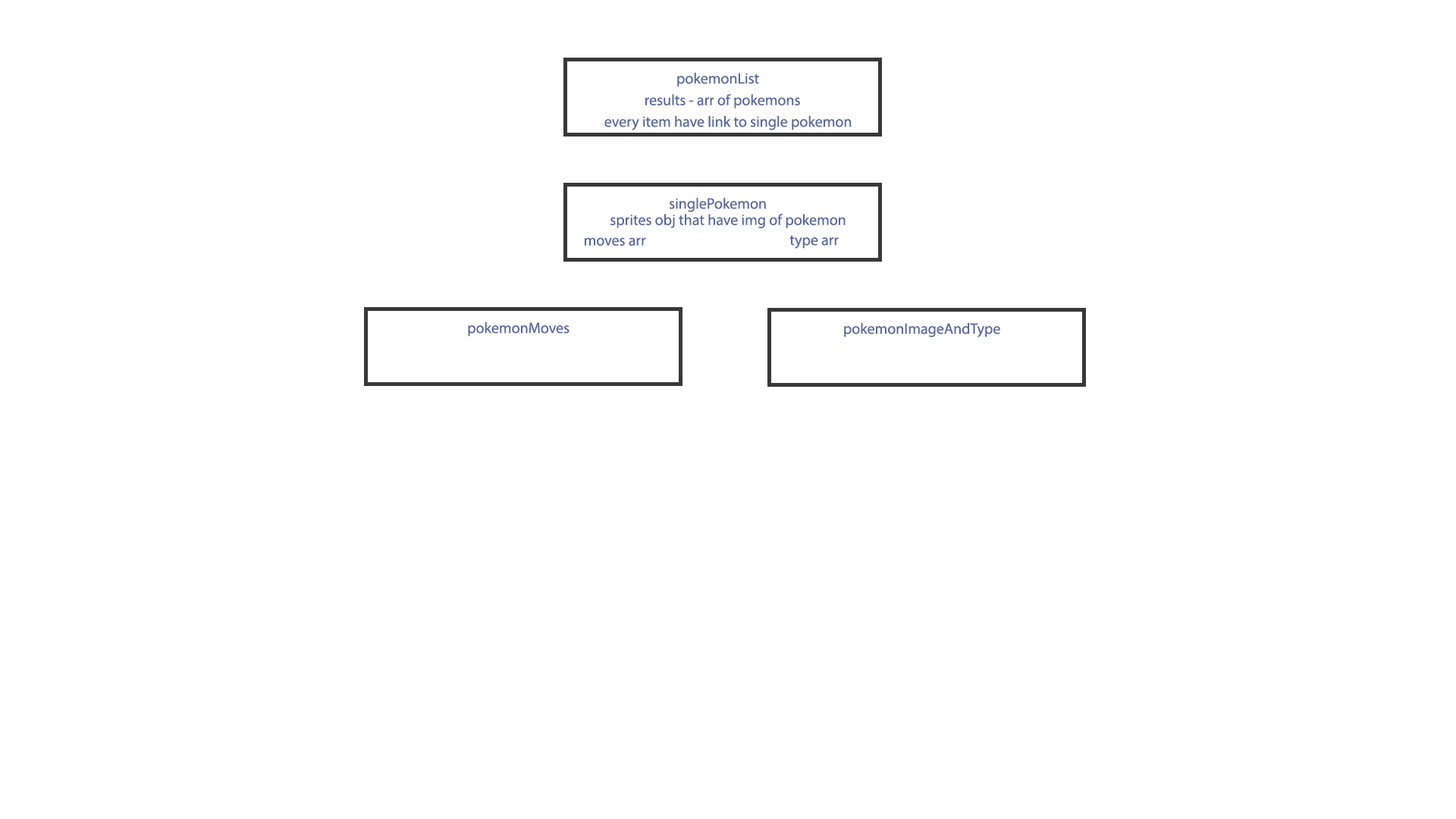
<style>
.page{position:relative;width:1456px;height:819px;background:#ffffff}
.page>*{position:absolute;margin:0}
.t1{font:15.2px "MyriadPro-Regular";color:#57669c}
</style>
<div class="page">
<p class="t1" style="left:677px;top:72px;width:82px;height:15px">pokemonList</p>
<p class="t1" style="left:645px;top:94px;width:155px;height:14px">results - arr of pokemons</p>
<p class="t1" style="left:604px;top:115px;width:248px;height:15px">every item have link to single pokemon</p>
<p class="t1" style="left:669px;top:197px;width:97px;height:15px">singlePokemon</p>
<p class="t1" style="left:610px;top:214px;width:236px;height:14px">sprites obj that have img of pokemon</p>
<p class="t1" style="left:585px;top:237px;width:61px;height:9px">moves arr</p>
<p class="t1" style="left:789px;top:235px;width:50px;height:14px">type arr</p>
<p class="t1" style="left:468px;top:322px;width:102px;height:15px">pokemonMoves</p>
<p class="t1" style="left:844px;top:322px;width:156px;height:15px">pokemonImageAndType</p>
</div>
